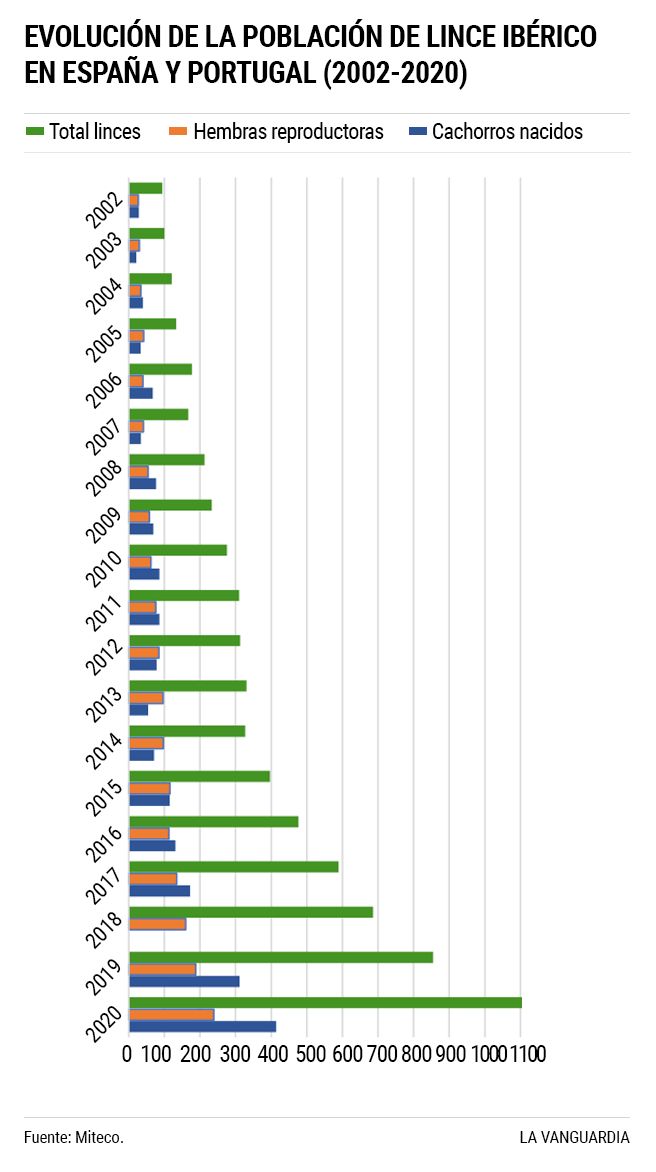
<style>
.page{position:relative;width:656px;height:1172px;background:#ffffff}
.page>*{position:absolute;margin:0}
.t1{font:30px/36px "RobotoCondensed-Bold";letter-spacing:-0.02em;color:#000000;text-transform:uppercase}
.t2{font:22px "RobotoCondensed-Regular";letter-spacing:-0.03em;color:#000000}
.t3{font:21.5px "RobotoCondensed-Regular";letter-spacing:-0.014em;color:#000000}
.t4{font:22.6px "RobotoCondensed-Regular";letter-spacing:-0.037em;color:#000000}
.t5{font:22.6px "RobotoCondensed-Regular";letter-spacing:-0.097em;color:#000000}
.t6{font:17px/21px "RobotoCondensed-Regular";letter-spacing:-0.014em;color:#000000}
.t7{font:17px "RobotoCondensed-Regular";letter-spacing:-0.014em;color:#000000}
</style>
<div class="page">
<p class="t1" style="left:25px;top:19px;width:572px;height:71px">Evolución de la población de lince ibérico en España y Portugal (2002-2020)</p>
<p class="t2" style="left:49px;top:122px;width:534px;height:21px">Total linces            Hembras reproductoras           Cachorros nacidos</p>
<p class="t3" style="left:85px;top:191px;width:38px;height:39px;rotate:-45deg">2002</p>
<p class="t3" style="left:85px;top:232px;width:37px;height:38px;rotate:-45deg">2003</p>
<p class="t3" style="left:85px;top:277px;width:37px;height:39px;rotate:-45deg">2004</p>
<p class="t3" style="left:85px;top:324px;width:37px;height:40px;rotate:-45deg">2005</p>
<p class="t3" style="left:85px;top:371px;width:37px;height:39px;rotate:-45deg">2006</p>
<p class="t3" style="left:85px;top:417px;width:35px;height:40px;rotate:-45deg">2007</p>
<p class="t3" style="left:85px;top:460px;width:37px;height:38px;rotate:-45deg">2008</p>
<p class="t3" style="left:85px;top:507px;width:36px;height:38px;rotate:-45deg">2009</p>
<p class="t3" style="left:85px;top:551px;width:37px;height:38px;rotate:-45deg">2010</p>
<p class="t3" style="left:85px;top:595px;width:36px;height:38px;rotate:-45deg">2011</p>
<p class="t3" style="left:85px;top:638px;width:38px;height:39px;rotate:-45deg">2012</p>
<p class="t3" style="left:85px;top:687px;width:37px;height:37px;rotate:-45deg">2013</p>
<p class="t3" style="left:85px;top:732px;width:37px;height:39px;rotate:-45deg">2014</p>
<p class="t3" style="left:85px;top:778px;width:37px;height:40px;rotate:-45deg">2015</p>
<p class="t3" style="left:85px;top:825px;width:37px;height:39px;rotate:-45deg">2016</p>
<p class="t3" style="left:85px;top:866px;width:35px;height:40px;rotate:-45deg">2017</p>
<p class="t3" style="left:85px;top:912px;width:37px;height:38px;rotate:-45deg">2018</p>
<p class="t3" style="left:85px;top:959px;width:36px;height:38px;rotate:-45deg">2019</p>
<p class="t3" style="left:85px;top:1006px;width:37px;height:38px;rotate:-45deg">2020</p>
<p class="t4" style="left:122px;top:1045px;width:424px;height:17px">0  100  200  300  400  500  600 700 800 900 <span class="t5">1000 1100</span></p>
<p class="t6" style="left:24px;top:1130px;width:99px;height:13px">Fuente: Miteco.<br>.</p>
<p class="t7" style="left:520px;top:1131px;width:110px;height:12px">LA VANGUARDIA</p>
</div>
